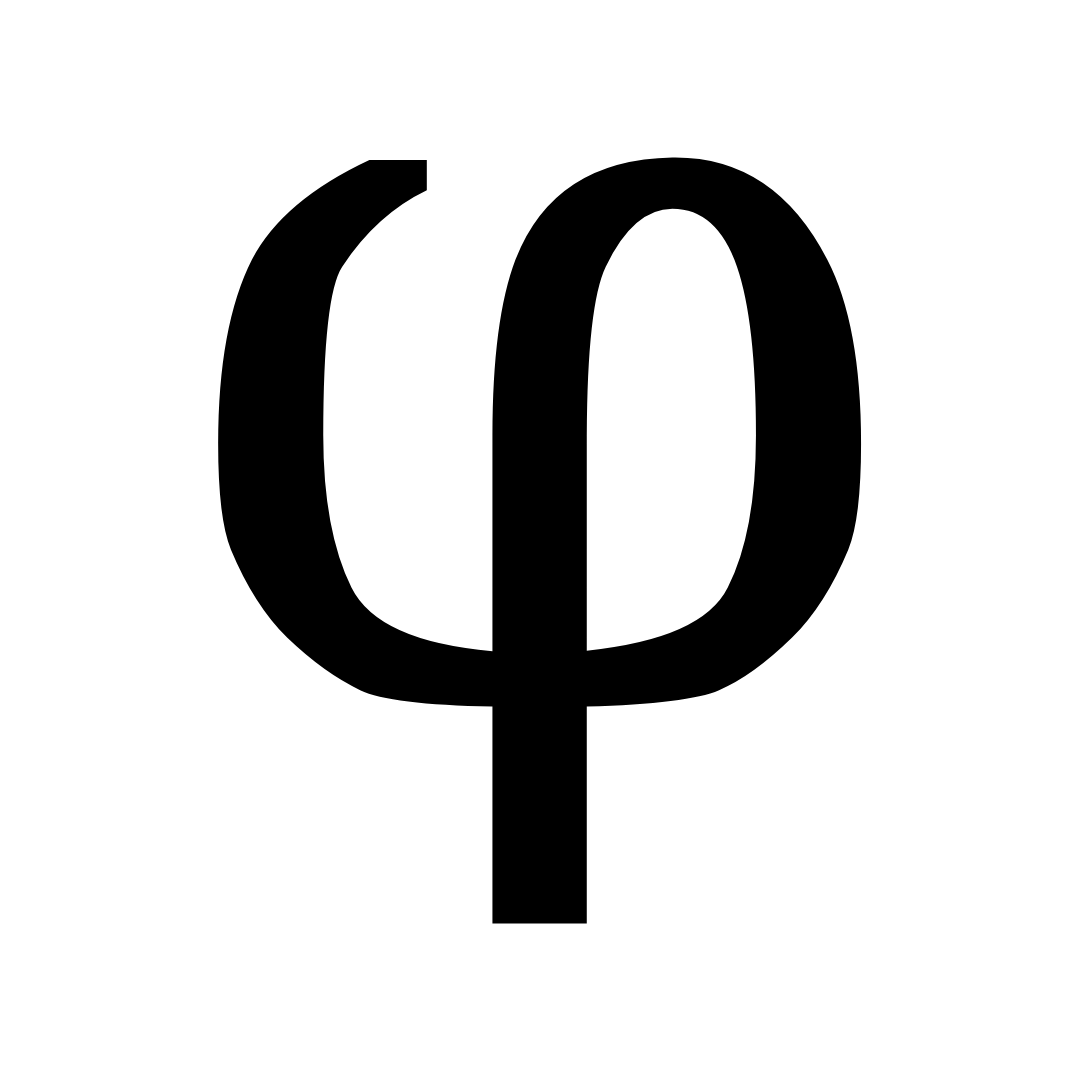
<style>
.page{position:relative;width:1080px;height:1080px;background:#ffffff}
.page>*{position:absolute;margin:0}
.t1{font:1050px "DejaVuSerif";color:#000000}
</style>
<div class="page">
<p class="t1" style="left:218px;top:155px;width:644px;height:769px">φ</p>
</div>
